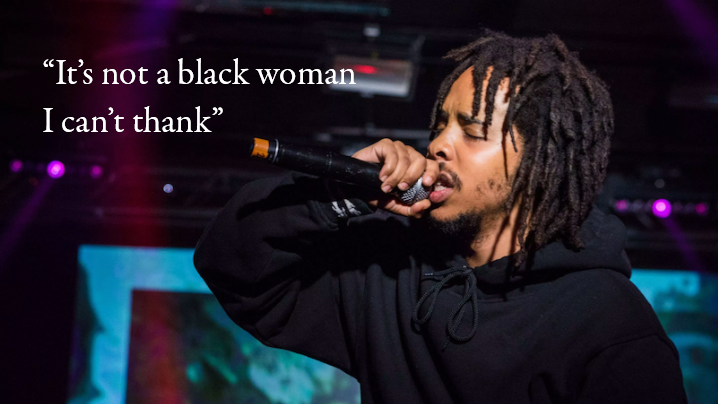
<style>
.page{position:relative;width:718px;height:404px}
.page>*{position:absolute;margin:0}
.t1{font:36px/48px "GaramondPremrPro";color:#ffffff}
</style>
<div class="page">
<p class="t1" style="left:43px;top:58px;width:313px;height:74px">“It’s not a black woman I can’t thank”</p>
</div>
